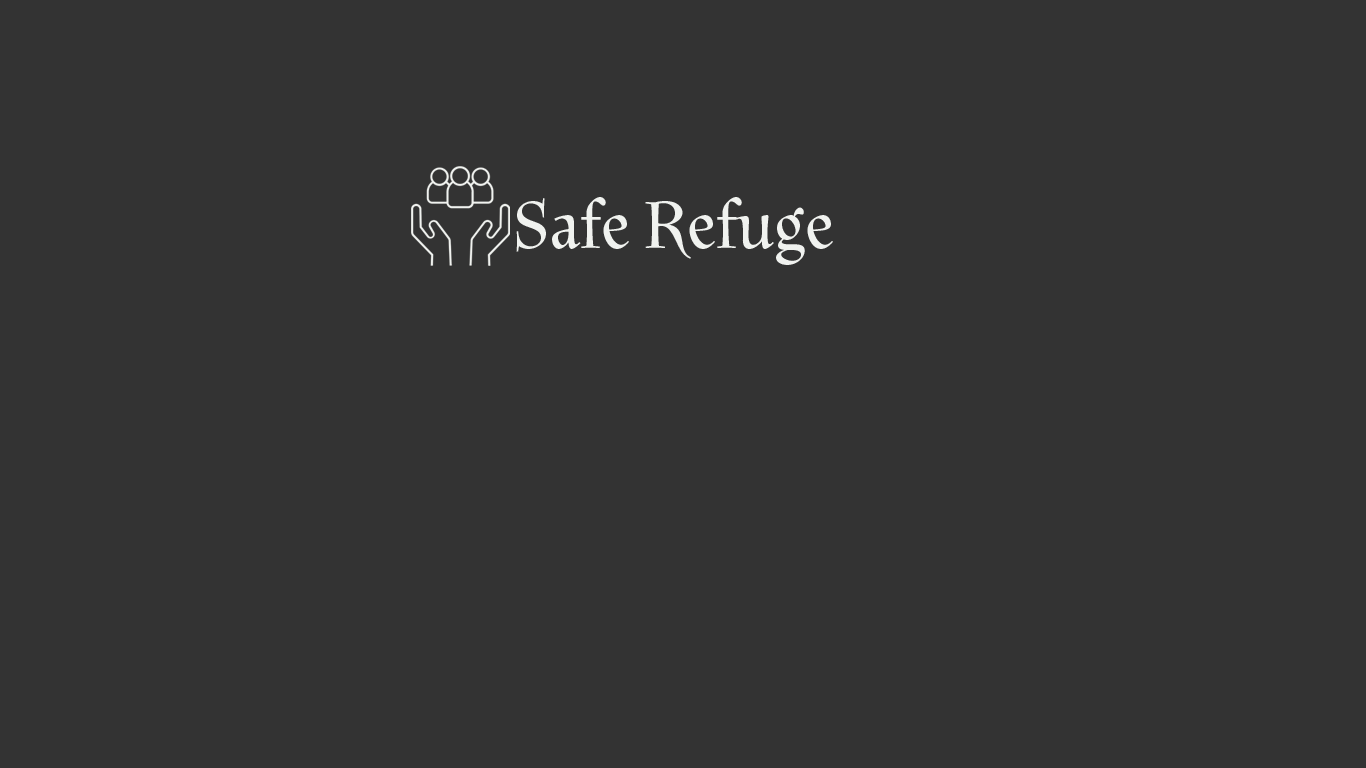
<style>
.page{position:relative;width:1366px;height:768px;background:#333333}
.page>*{position:absolute;margin:0}
.t1{font:72px "Litania-Regular";color:#f0f2ef}
</style>
<div class="page">
<p class="t1" style="left:516px;top:197px;width:317px;height:68px">Safe Refuge</p>
</div>
